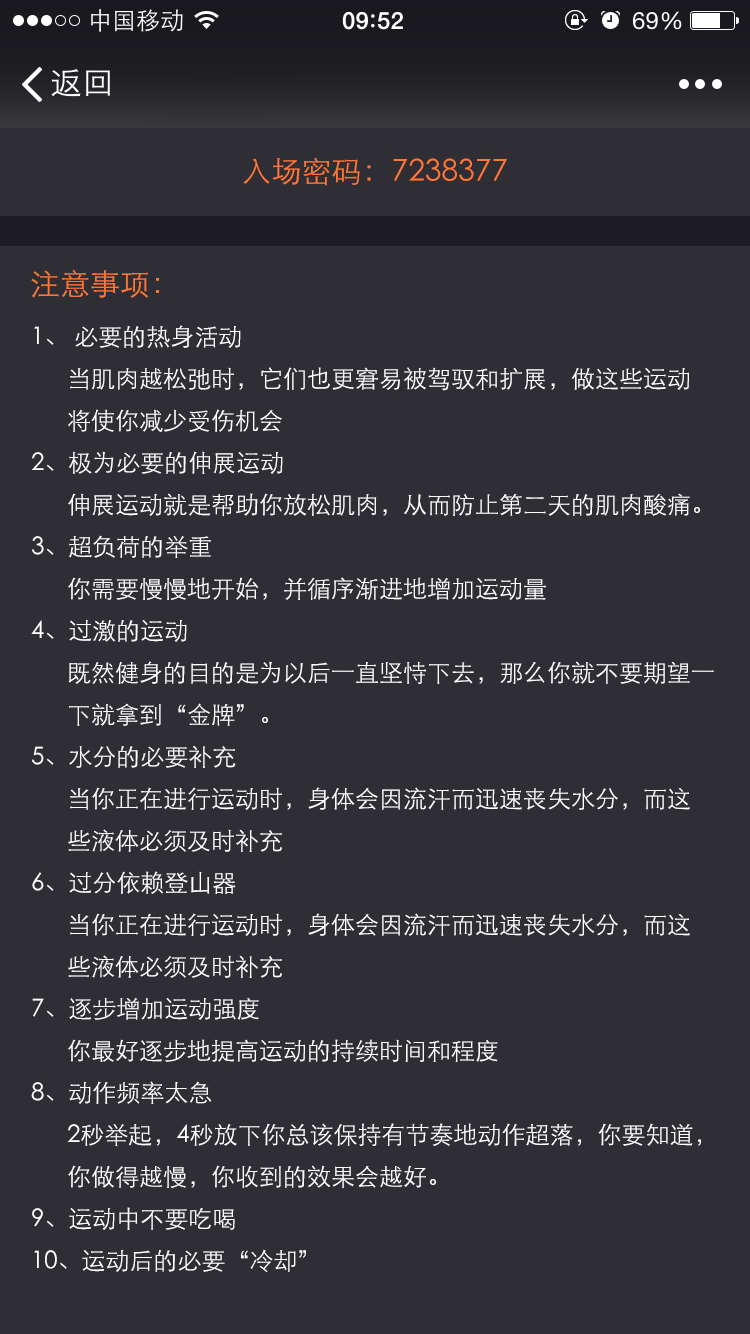
<style>
.page{position:relative;width:750px;height:1334px;background:#2f2e34}
.page>*{position:absolute;margin:0}
.t1{font:30px "STXihei";color:#ff7736}
.t2{font:24px "STXihei";color:#ffffff}
</style>
<div class="page">
<p class="t1" style="left:243px;top:157px;width:264px;height:29px">入场密码：7238377</p>
<p class="t1" style="left:31px;top:270px;width:128px;height:28px">注意事项：</p>
<p class="t2" style="left:31px;top:325px;width:683px;height:948px">1、 必要的热身活动<br> 当肌肉越松弛时，它们也更窘易被驾驭和扩展，做这些运动<br> 将使你减少受伤机会<br>2、极为必要的伸展运动<br> 伸展运动就是帮助你放松肌肉，从而防止第二天的肌肉酸痛。<br>3、超负荷的举重<br> 你需要慢慢地开始，并循序渐进地增加运动量<br>4、过激的运动<br> 既然健身的目的是为以后一直坚恃下去，那么你就不要期望一<br> 下就拿到“金牌”。<br>5、水分的必要补充<br> 当你正在进行运动时，身体会因流汗而迅速丧失水分，而这<br> 些液体必须及时补充<br>6、过分依赖登山器<br> 当你正在进行运动时，身体会因流汗而迅速丧失水分，而这<br> 些液体必须及时补充<br>7、逐步增加运动强度<br> 你最好逐步地提高运动的持续时间和程度<br>8、动作频率太急<br> 2秒举起，4秒放下你总该保持有节奏地动作超落，你要知道，<br> 你做得越慢，你收到的效果会越好。<br>9、运动中不要吃喝<br>10、运动后的必要“冷却”</p>
</div>
